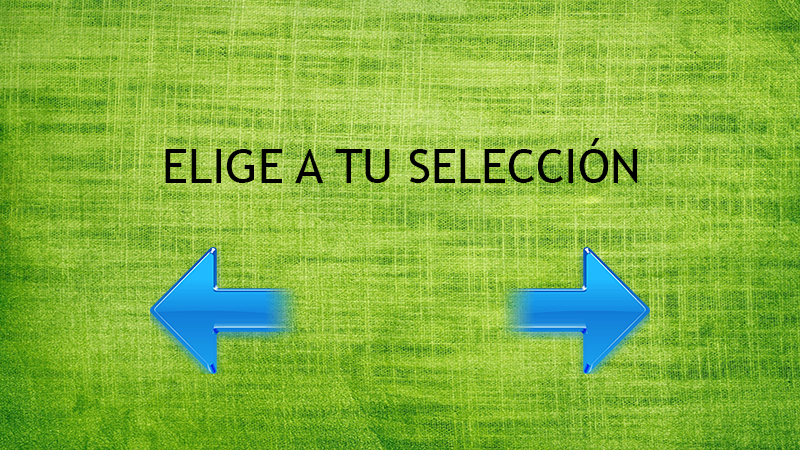
<style>
.page{position:relative;width:800px;height:450px}
.page>*{position:absolute;margin:0}
.t1{font:48px "TrebuchetMS";color:#000000}
</style>
<div class="page">
<p class="t1" style="left:165px;top:138px;width:473px;height:45px">ELIGE A TU SELECCIÓN</p>
</div>
